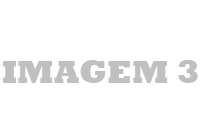
<style>
.page{position:relative;width:200px;height:140px;background:#ffffff}
.page>*{position:absolute;margin:0}
.t1{font:33.3px "Rockwell-ExtraBold";color:#c0c0c0}
</style>
<div class="page">
<p class="t1" style="left:3px;top:60px;width:195px;height:23px">IMAGEM 3</p>
</div>
